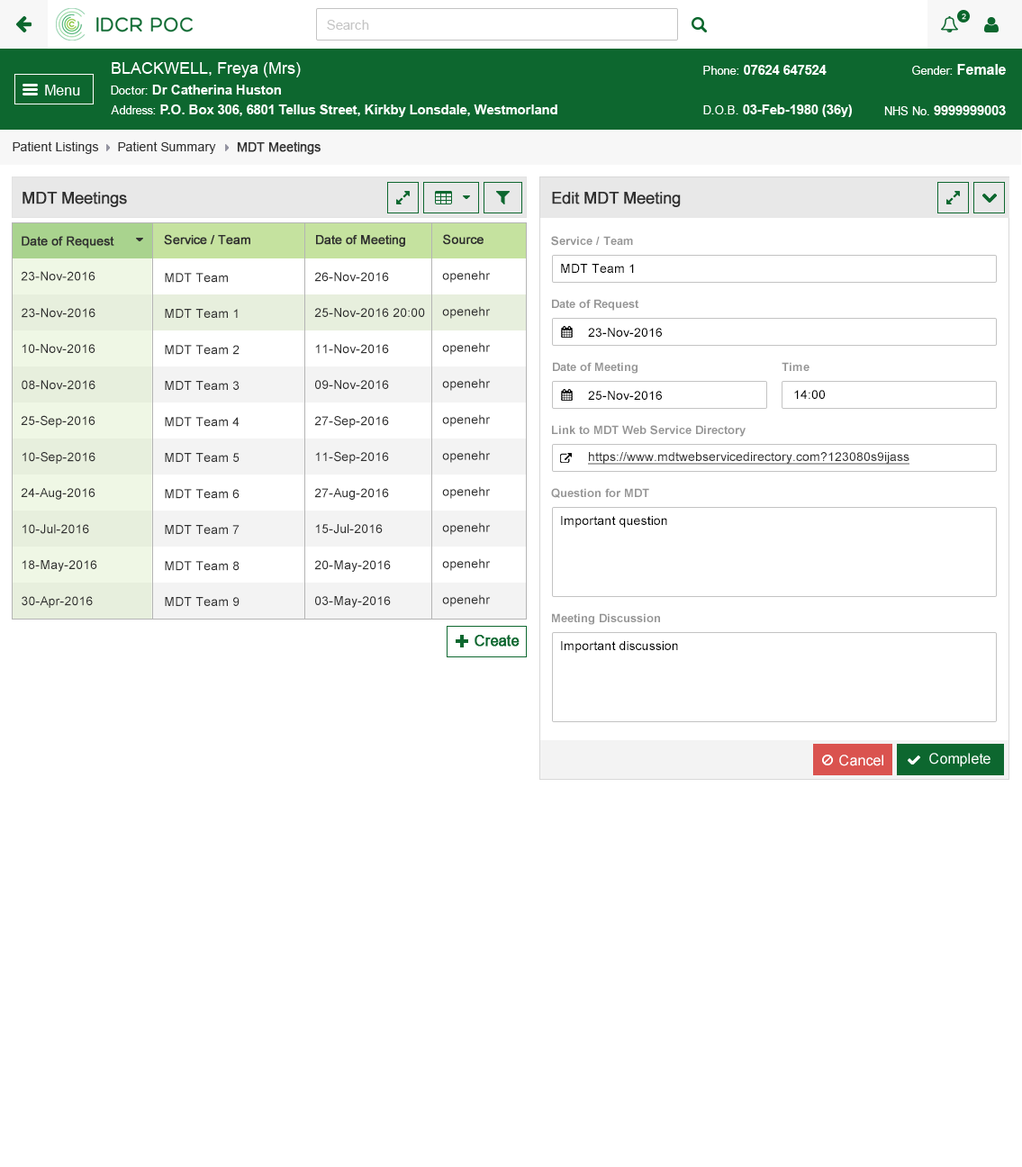
<style>
.page{position:relative;width:1022px;height:1167px;background:#ffffff}
.page>*{position:absolute;margin:0}
.t1{font:12.6px "ArialMT";color:#313131}
.t2{font:12.6px "ArialMT";color:#313131;font-weight:bold}
.t3{font:16.2px "ArialMT";color:#303030;font-weight:bold}
.t4{font:12.6px "ArialMT";color:#303030;font-weight:bold}
.t5{font:11.7px "Arial-BoldMT";color:#959595}
.t6{font:12.6px "ArialMT";color:#000000}
.t7{font:12.6px "ArialMT";color:#303030}
.t8{font:12.6px "ArialMT";color:#303030;text-decoration:underline}
</style>
<div class="page">
<p class="t1" style="left:13px;top:141px;width:86px;height:13px">Patient Listings</p>
<p class="t1" style="left:118px;top:141px;width:98px;height:13px">Patient Summary</p>
<p class="t2" style="left:237px;top:141px;width:84px;height:14px">MDT Meetings</p>
<p class="t3" style="left:23px;top:192px;width:104px;height:15px">MDT Meetings</p>
<p class="t3" style="left:552px;top:192px;width:129px;height:15px">Edit MDT Meeting</p>
<p class="t4" style="left:22px;top:236px;width:92px;height:12px">Date of Request</p>
<p class="t4" style="left:164px;top:234px;width:86px;height:11px">Service / Team</p>
<p class="t4" style="left:316px;top:235px;width:89px;height:12px">Date of Meeting</p>
<p class="t4" style="left:443px;top:234px;width:40px;height:11px">Source</p>
<p class="t5" style="left:551px;top:236px;width:82px;height:10px">Service / Team</p>
<p class="t6" style="left:561px;top:264px;width:73px;height:9px">MDT Team 1</p>
<p class="t7" style="left:21px;top:271px;width:74px;height:10px">23-Nov-2016</p>
<p class="t7" style="left:165px;top:273px;width:63px;height:10px">MDT Team</p>
<p class="t7" style="left:314px;top:272px;width:75px;height:10px">26-Nov-2016</p>
<p class="t7" style="left:442px;top:270px;width:49px;height:13px">openehr</p>
<p class="t5" style="left:552px;top:299px;width:87px;height:12px">Date of Request</p>
<p class="t7" style="left:22px;top:308px;width:73px;height:10px">23-Nov-2016</p>
<p class="t7" style="left:165px;top:309px;width:73px;height:9px">MDT Team 1</p>
<p class="t7" style="left:314px;top:308px;width:111px;height:9px">25-Nov-2016 20:00</p>
<p class="t7" style="left:442px;top:306px;width:49px;height:13px">openehr</p>
<p class="t6" style="left:588px;top:328px;width:74px;height:9px">23-Nov-2016</p>
<p class="t7" style="left:22px;top:344px;width:73px;height:9px">10-Nov-2016</p>
<p class="t7" style="left:165px;top:345px;width:74px;height:10px">MDT Team 2</p>
<p class="t7" style="left:315px;top:344px;width:74px;height:10px">11-Nov-2016</p>
<p class="t7" style="left:442px;top:342px;width:49px;height:13px">openehr</p>
<p class="t5" style="left:553px;top:362px;width:84px;height:12px">Date of Meeting</p>
<p class="t5" style="left:782px;top:362px;width:27px;height:9px">Time</p>
<p class="t7" style="left:22px;top:380px;width:73px;height:10px">08-Nov-2016</p>
<p class="t7" style="left:165px;top:381px;width:74px;height:9px">MDT Team 3</p>
<p class="t7" style="left:315px;top:380px;width:74px;height:9px">09-Nov-2016</p>
<p class="t7" style="left:442px;top:378px;width:49px;height:13px">openehr</p>
<p class="t6" style="left:794px;top:390px;width:31px;height:9px">14:00</p>
<p class="t6" style="left:588px;top:391px;width:74px;height:9px">25-Nov-2016</p>
<p class="t7" style="left:21px;top:415px;width:74px;height:13px">25-Sep-2016</p>
<p class="t7" style="left:165px;top:417px;width:74px;height:10px">MDT Team 4</p>
<p class="t7" style="left:314px;top:416px;width:75px;height:12px">27-Sep-2016</p>
<p class="t7" style="left:442px;top:414px;width:49px;height:13px">openehr</p>
<p class="t5" style="left:552px;top:425px;width:193px;height:12px">Link to MDT Web Service Directory</p>
<p class="t7" style="left:23px;top:452px;width:72px;height:12px">10-Sep-2016</p>
<p class="t7" style="left:165px;top:453px;width:74px;height:9px">MDT Team 5</p>
<p class="t7" style="left:315px;top:451px;width:74px;height:13px">11-Sep-2016</p>
<p class="t7" style="left:442px;top:450px;width:49px;height:13px">openehr</p>
<p class="t8" style="left:588px;top:452px;width:321px;height:13px">https://www.mdtwebservicedirectory.com?123080s9ijass</p>
<p class="t7" style="left:21px;top:488px;width:74px;height:12px">24-Aug-2016</p>
<p class="t7" style="left:165px;top:489px;width:74px;height:10px">MDT Team 6</p>
<p class="t7" style="left:314px;top:488px;width:75px;height:12px">27-Aug-2016</p>
<p class="t7" style="left:442px;top:486px;width:49px;height:13px">openehr</p>
<p class="t5" style="left:551px;top:488px;width:98px;height:10px">Question for MDT</p>
<p class="t6" style="left:561px;top:516px;width:106px;height:12px">Important question</p>
<p class="t7" style="left:23px;top:524px;width:66px;height:10px">10-Jul-2016</p>
<p class="t7" style="left:165px;top:525px;width:74px;height:9px">MDT Team 7</p>
<p class="t7" style="left:315px;top:524px;width:68px;height:10px">15-Jul-2016</p>
<p class="t7" style="left:442px;top:522px;width:49px;height:13px">openehr</p>
<p class="t7" style="left:22px;top:560px;width:75px;height:12px">18-May-2016</p>
<p class="t7" style="left:165px;top:561px;width:74px;height:10px">MDT Team 8</p>
<p class="t7" style="left:314px;top:560px;width:77px;height:12px">20-May-2016</p>
<p class="t7" style="left:442px;top:558px;width:49px;height:13px">openehr</p>
<p class="t7" style="left:22px;top:596px;width:71px;height:12px">30-Apr-2016</p>
<p class="t7" style="left:165px;top:597px;width:74px;height:9px">MDT Team 9</p>
<p class="t7" style="left:315px;top:596px;width:76px;height:12px">03-May-2016</p>
<p class="t7" style="left:442px;top:594px;width:49px;height:13px">openehr</p>
<p class="t5" style="left:552px;top:613px;width:108px;height:12px">Meeting Discussion</p>
<p class="t6" style="left:561px;top:641px;width:117px;height:12px">Important discussion</p>
</div>
